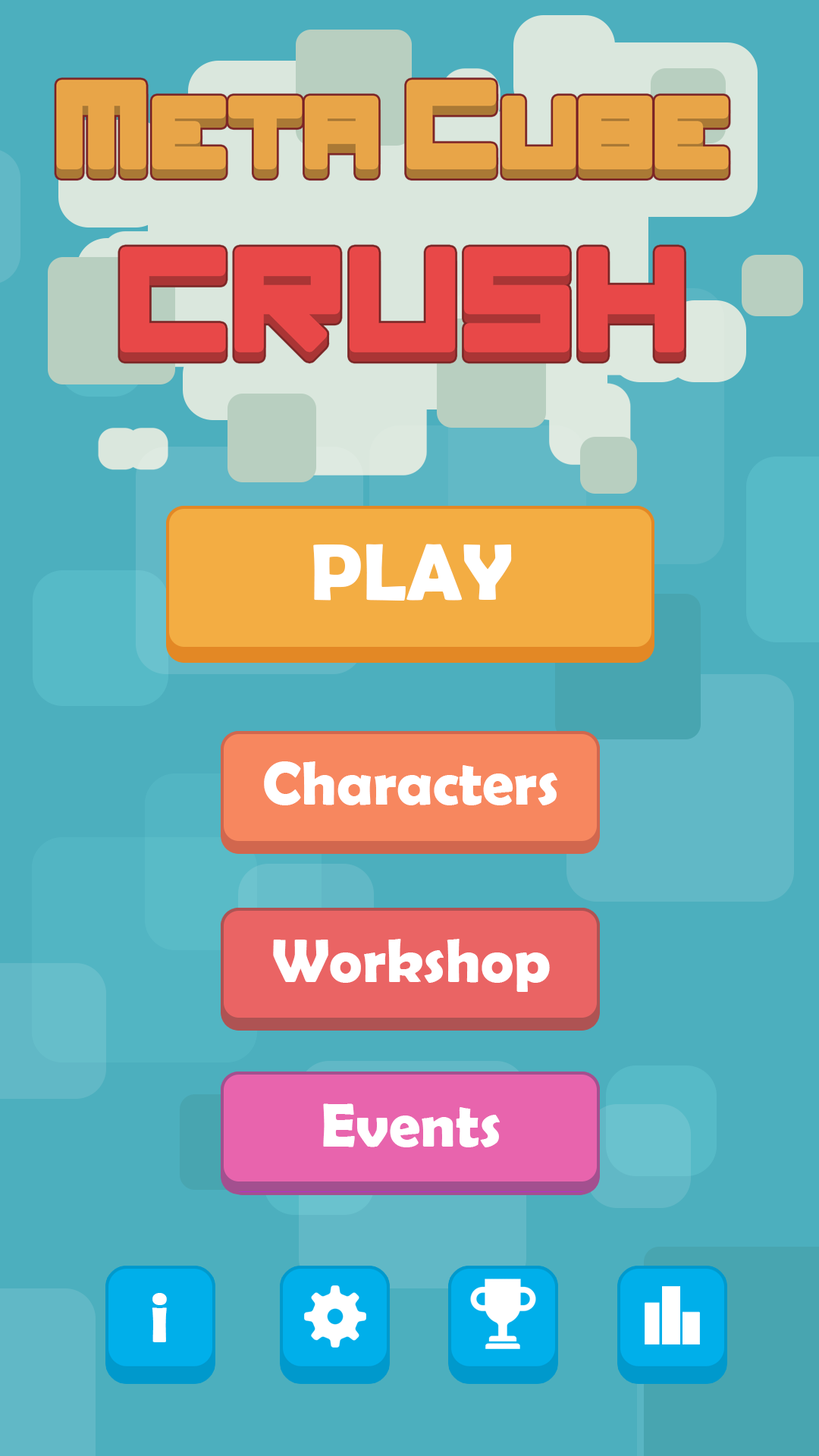
<style>
.page{position:relative;width:819px;height:1456px;background:#4cafbe}
.page>*{position:absolute;margin:0}
.t1{font:80.3px "BerlinSansFBDemi-Bold";color:#ffffff}
.t2{font:62.2px "BerlinSansFBDemi-Bold";color:#ffffff}
.t3{font:73.6px "BerlinSansFBDemi-Bold";color:#ffffff}
</style>
<div class="page">
<p class="t1" style="left:313px;top:544px;width:199px;height:57px">PLAY</p>
<p class="t2" style="left:264px;top:761px;width:293px;height:44px">Characters</p>
<p class="t2" style="left:273px;top:939px;width:277px;height:53px">Workshop</p>
<p class="t2" style="left:323px;top:1103px;width:177px;height:44px">Events</p>
<p class="t3" style="left:152px;top:1293px;width:15px;height:49px">i</p>
</div>
